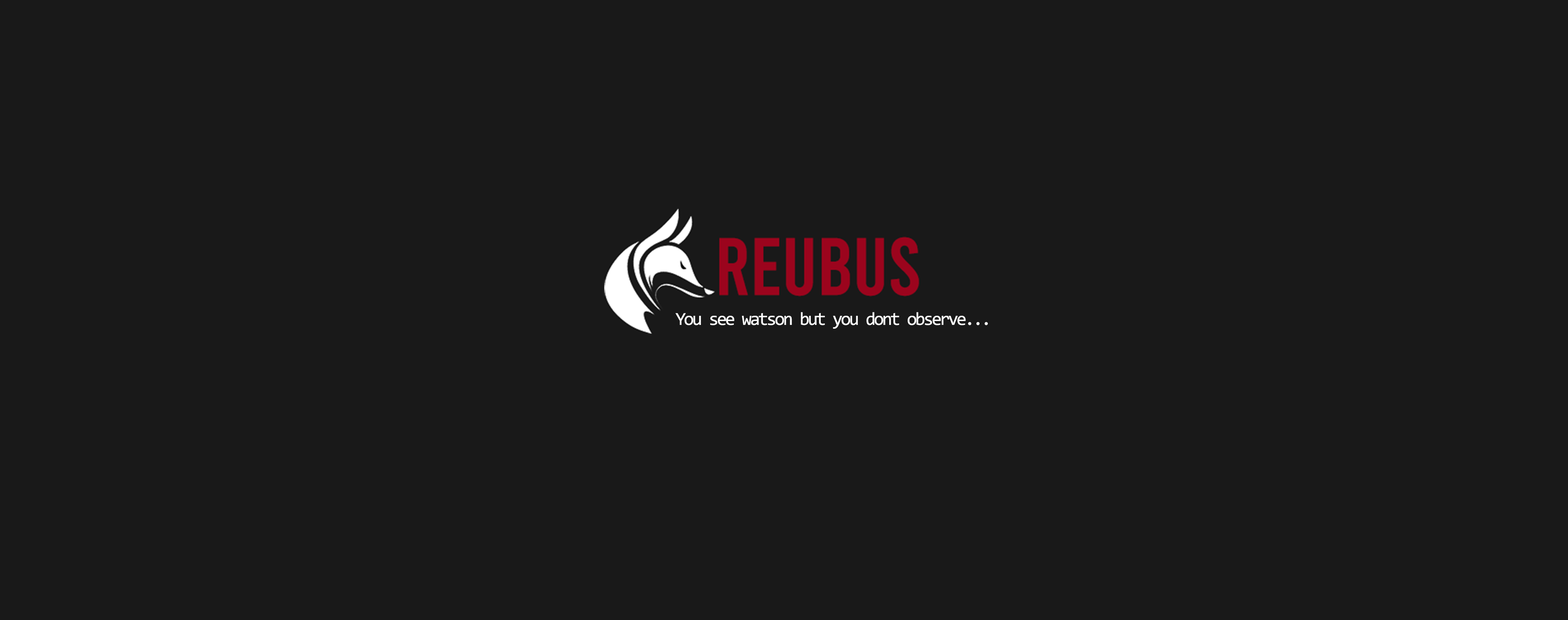
<style>
.page{position:relative;width:1568px;height:620px;background:#191919}
.page>*{position:absolute;margin:0}
.t1{font:18.4px "Consolas";letter-spacing:-0.1em;color:#ffffff}
</style>
<div class="page">
<p class="t1" style="left:675px;top:312px;width:313px;height:17px">You see watson but you dont observe...</p>
</div>
